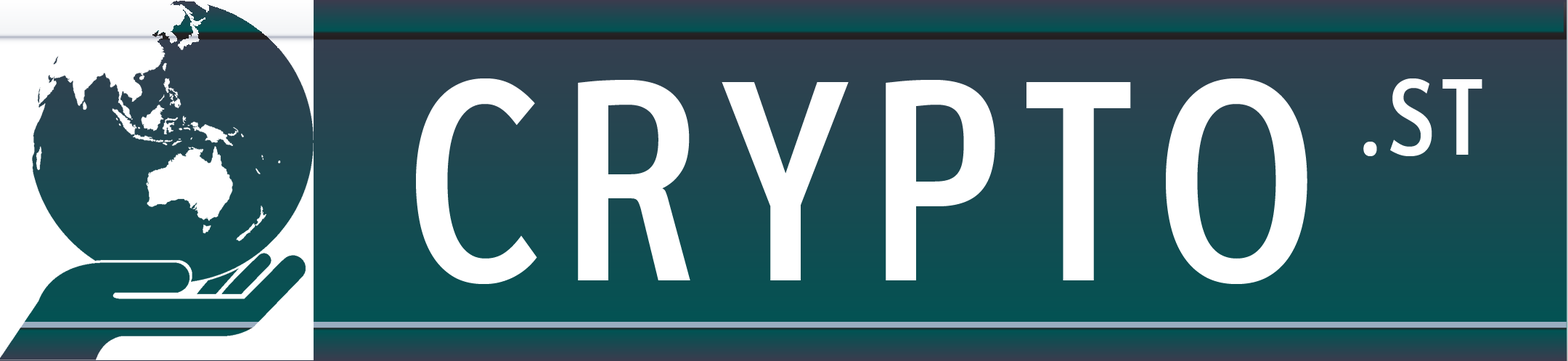
<style>
.page{position:relative;width:1568px;height:361px}
.page>*{position:absolute;margin:0}
.t1{font:287.3px "ClearviewHwy-Two-W";color:#ffffff;text-transform:uppercase}
.t2{font:108.9px "ClearviewHwy-Two-W";color:#ffffff;text-transform:uppercase}
</style>
<div class="page">
<p class="t1" style="left:416px;top:78px;width:891px;height:206px">Crypto</p>
<p class="t2" style="left:1363px;top:78px;width:119px;height:78px">.st</p>
</div>
